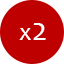
<style>
.page{position:relative;width:64px;height:64px;background:#bf0000}
.page>*{position:absolute;margin:0}
.t1{font:25px "Candara";color:#ffffff}
.t2{font:33.3px "Candara";color:#ffffff}
</style>
<div class="page">
<p class="t1" style="left:19px;top:23px;width:27px;height:17px">x<span class="t2">2</span></p>
</div>
